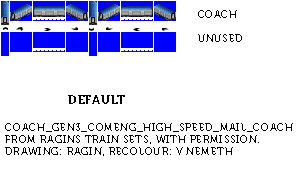
<style>
.page{position:relative;width:300px;height:174px;background:#ffffff}
.page>*{position:absolute;margin:0}
.t1{font:10px "Museo700-Regular";letter-spacing:0.075em;color:#000000;text-transform:uppercase}
.t2{font:12px "Museo700-Regular";letter-spacing:0.075em;color:#000000;text-transform:uppercase}
</style>
<div class="page">
<p class="t1" style="left:198px;top:10px;width:44px;height:32px">coach<br><br>unused</p>
<p class="t2" style="left:68px;top:95px;width:57px;height:9px">DEFAULT</p>
<p class="t1" style="left:5px;top:123px;width:288px;height:33px">Coach_Gen3_Comeng_High_Speed_mail_Coach<br>From Ragins Train Sets, with permission.<br>Drawing: Ragin, recolour: V Nemeth</p>
</div>
